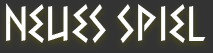
<style>
.page{position:relative;width:213px;height:53px;background:#333333}
.page>*{position:absolute;margin:0}
.t1{font:50px "Xtra";color:#ffffff}
</style>
<div class="page">
<p class="t1" style="left:6px;top:3px;width:200px;height:40px">Neues Spiel</p>
</div>
